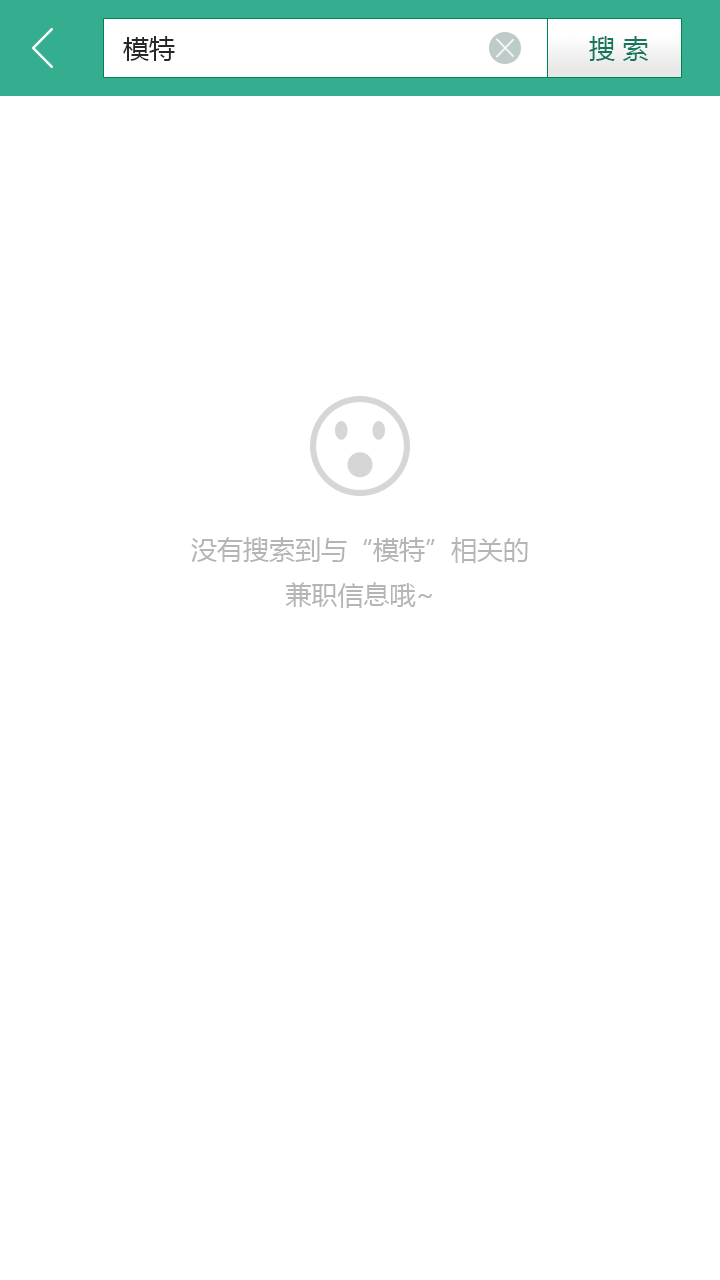
<style>
.page{position:relative;width:720px;height:1280px;background:#ffffff}
.page>*{position:absolute;margin:0}
.t1{font:26px "MicrosoftYaHei";color:#272727}
.t2{font:26px "MicrosoftYaHei";color:#12775d}
.t3{font:26px "MicrosoftYaHei";color:#b5b5b5}
</style>
<div class="page">
<p class="t1" style="left:123px;top:36px;width:52px;height:25px">模特</p>
<p class="t2" style="left:589px;top:36px;width:59px;height:25px">搜 索</p>
<p class="t3" style="left:191px;top:537px;width:337px;height:71px;text-align:center">没有搜索到与“模特”相关的<br>兼职信息哦~</p>
</div>
